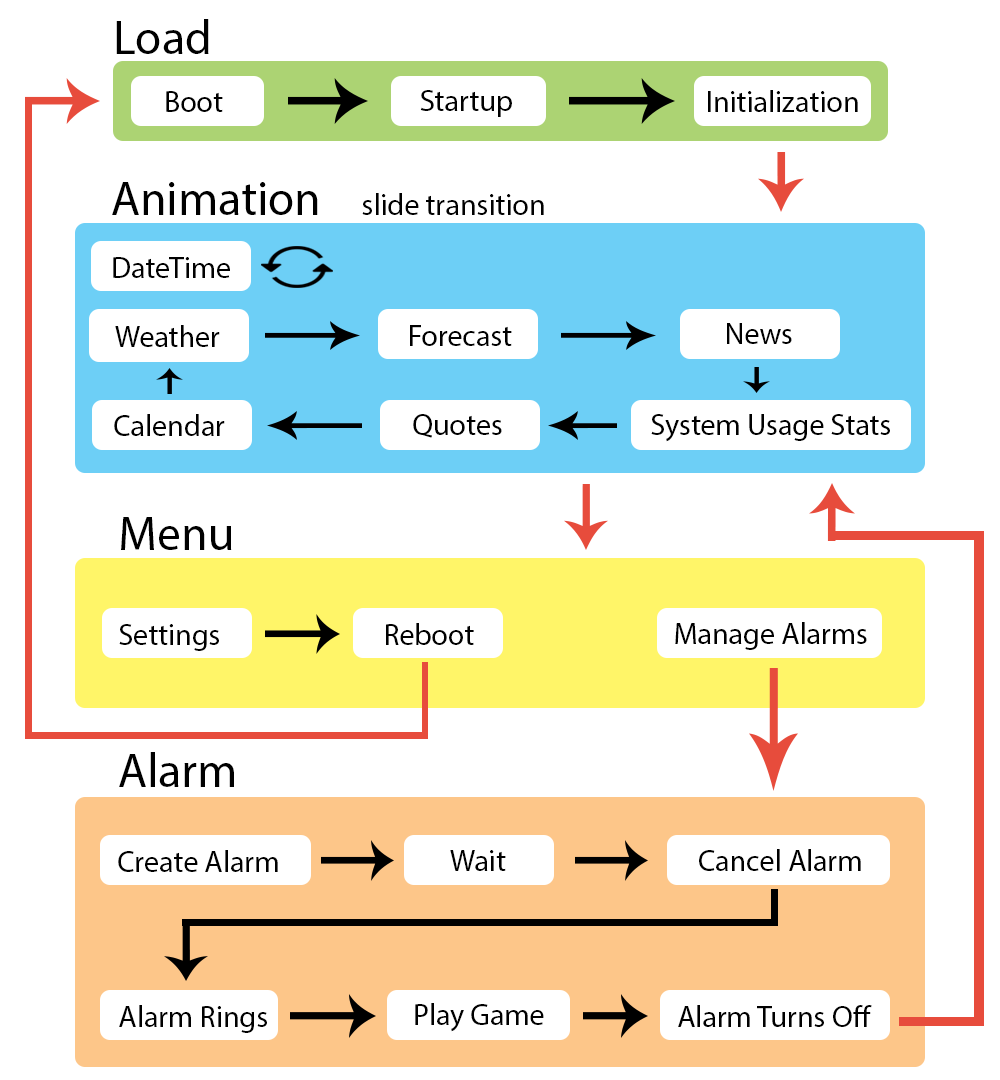
<style>
.page{position:relative;width:1000px;height:1080px;background:#ffffff}
.page>*{position:absolute;margin:0}
.t1{font:48px "MyriadPro-Regular";color:#000000}
.t2{font:30px "MyriadPro-Regular";color:#000000}
.t3{font:30px "MyriadPro-Regular";color:#010101}
</style>
<div class="page">
<p class="t1" style="left:116px;top:19px;width:93px;height:35px">Load</p>
<p class="t2" style="left:166px;top:91px;width:57px;height:21px">Boot</p>
<p class="t2" style="left:420px;top:90px;width:92px;height:27px">Startup</p>
<p class="t2" style="left:708px;top:90px;width:150px;height:22px">Initialization</p>
<p class="t2" style="left:112px;top:182px;width:432px;height:33px"><span class="t1">Animation    </span>slide transition</p>
<p class="t2" style="left:113px;top:257px;width:117px;height:21px">DateTime</p>
<p class="t2" style="left:115px;top:325px;width:105px;height:22px">Weather</p>
<p class="t2" style="left:410px;top:325px;width:102px;height:21px">Forecast</p>
<p class="t2" style="left:727px;top:323px;width:65px;height:21px">News</p>
<p class="t2" style="left:114px;top:414px;width:111px;height:22px">Calendar</p>
<p class="t2" style="left:413px;top:414px;width:89px;height:24px">Quotes</p>
<p class="t2" style="left:651px;top:414px;width:239px;height:28px">System Usage Stats</p>
<p class="t1" style="left:121px;top:517px;width:111px;height:33px">Menu</p>
<p class="t2" style="left:119px;top:624px;width:100px;height:27px">Settings</p>
<p class="t2" style="left:386px;top:623px;width:88px;height:22px">Reboot</p>
<p class="t2" style="left:675px;top:622px;width:192px;height:28px">Manage Alarms</p>
<p class="t1" style="left:119px;top:752px;width:115px;height:35px">Alarm</p>
<p class="t2" style="left:118px;top:850px;width:160px;height:22px">Create Alarm</p>
<p class="t3" style="left:450px;top:850px;width:56px;height:21px">Wait</p>
<p class="t2" style="left:699px;top:849px;width:162px;height:22px">Cancel Alarm</p>
<p class="t2" style="left:119px;top:1005px;width:148px;height:28px">Alarm Rings</p>
<p class="t2" style="left:415px;top:1003px;width:129px;height:29px">Play Game</p>
<p class="t2" style="left:678px;top:1005px;width:194px;height:22px">Alarm Turns Off</p>
</div>
